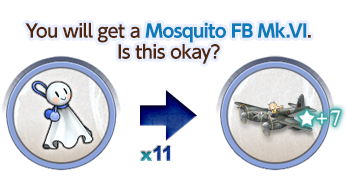
<style>
.page{position:relative;width:347px;height:177px;background:#ffffff}
.page>*{position:absolute;margin:0}
.t1{font:18px/21px "UDShinGoPro-Bold";letter-spacing:-0.04em;color:#0d7bba}
.t2{font:18px/21px "UDShinGoPro-DeBold";letter-spacing:-0.04em;color:#50260d}
</style>
<div class="page">
<p class="t1" style="left:25px;top:22px;width:286px;height:42px;text-align:center"><span class="t2">You will get a </span>Mosquito FB Mk.VI<span class="t2">.<br>Is this okay?</span></p>
</div>
